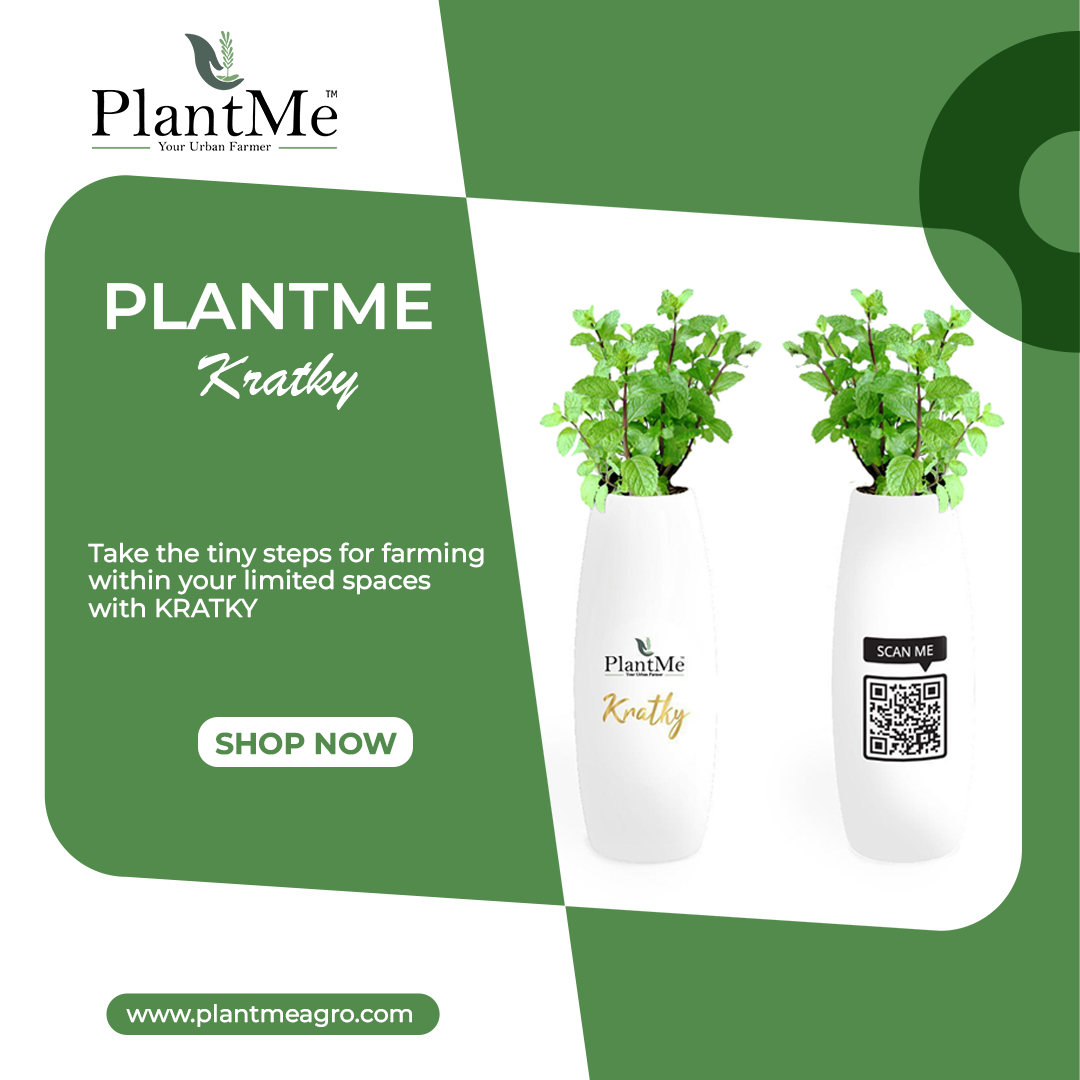
<style>
.page{position:relative;width:1080px;height:1080px;background:#528b4b}
.page>*{position:absolute;margin:0}
.t1{font:65.3px "MontserratRoman-SemiBold";color:#ffffff;text-transform:uppercase}
.t2{font:68.3px "BrushScriptMT";color:#ffffff}
.t3{font:6.2px/27.8px "MontserratRoman-Medium";color:#ffffff}
.t4{font:29.9px "MontserratRoman-Bold";color:#528b4b;text-transform:uppercase}
.t5{font:24px "MontserratRoman-Medium";color:#ffffff}
</style>
<div class="page">
<p class="t1" style="left:107px;top:283px;width:325px;height:47px">plantme</p>
<p class="t2" style="left:197px;top:353px;width:162px;height:57px">Kratky</p>
<p class="t3" style="left:88px;top:542px;width:396px;height:76px">Take the tiny steps for farming<br>within your limited spaces<br>with KRATKY</p>
<p class="t4" style="left:215px;top:732px;width:182px;height:23px">Shop now</p>
<p class="t5" style="left:126px;top:1004px;width:286px;height:23px">www.plantmeagro.com</p>
</div>
